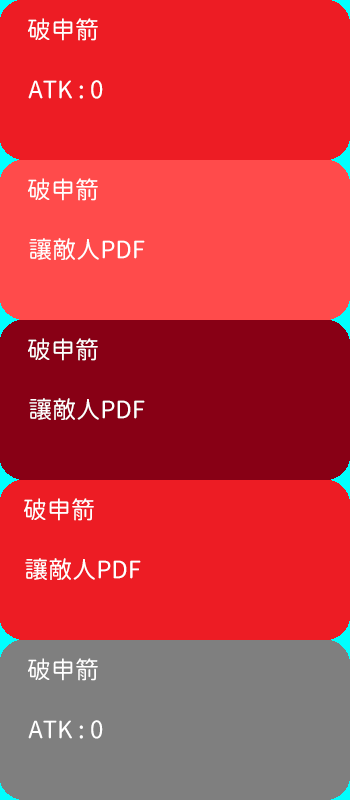
<style>
.page{position:relative;width:350px;height:800px;background:#ed1c24}
.page>*{position:absolute;margin:0}
.t1{font:24px "GenSenRoundedTW-R";color:#ffffff}
</style>
<div class="page">
<p class="t1" style="left:28px;top:18px;width:70px;height:23px">破申箭</p>
<p class="t1" style="left:28px;top:80px;width:75px;height:19px">ATK : 0</p>
<p class="t1" style="left:28px;top:178px;width:70px;height:23px">破申箭</p>
<p class="t1" style="left:29px;top:238px;width:116px;height:22px">讓敵人PDF</p>
<p class="t1" style="left:28px;top:338px;width:70px;height:23px">破申箭</p>
<p class="t1" style="left:29px;top:398px;width:116px;height:22px">讓敵人PDF</p>
<p class="t1" style="left:24px;top:498px;width:70px;height:23px">破申箭</p>
<p class="t1" style="left:25px;top:558px;width:116px;height:22px">讓敵人PDF</p>
<p class="t1" style="left:28px;top:658px;width:70px;height:23px">破申箭</p>
<p class="t1" style="left:28px;top:720px;width:75px;height:19px">ATK : 0</p>
</div>
